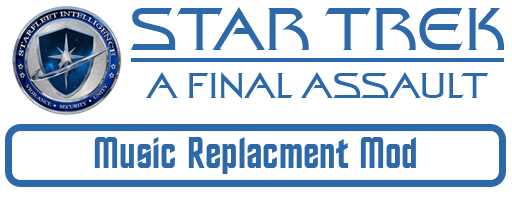
<style>
.page{position:relative;width:512px;height:200px;background:#ffffff}
.page>*{position:absolute;margin:0}
.t1{font:60px "StarTrekFilmBT-Regular";color:#2d68a9}
.t2{font:36px "StarTrekFilmBT-Regular";color:#2d68a9}
.t3{font:44px "StarTrekBT-Regular";color:#2d68a9}
</style>
<div class="page">
<p class="t1" style="left:131px;top:7px;width:373px;height:43px">STAR TREK</p>
<p class="t2" style="left:146px;top:72px;width:343px;height:27px">A FINAL ASSAULT</p>
<p class="t3" style="left:94px;top:137px;width:322px;height:37px">Music Replacment Mod</p>
</div>
